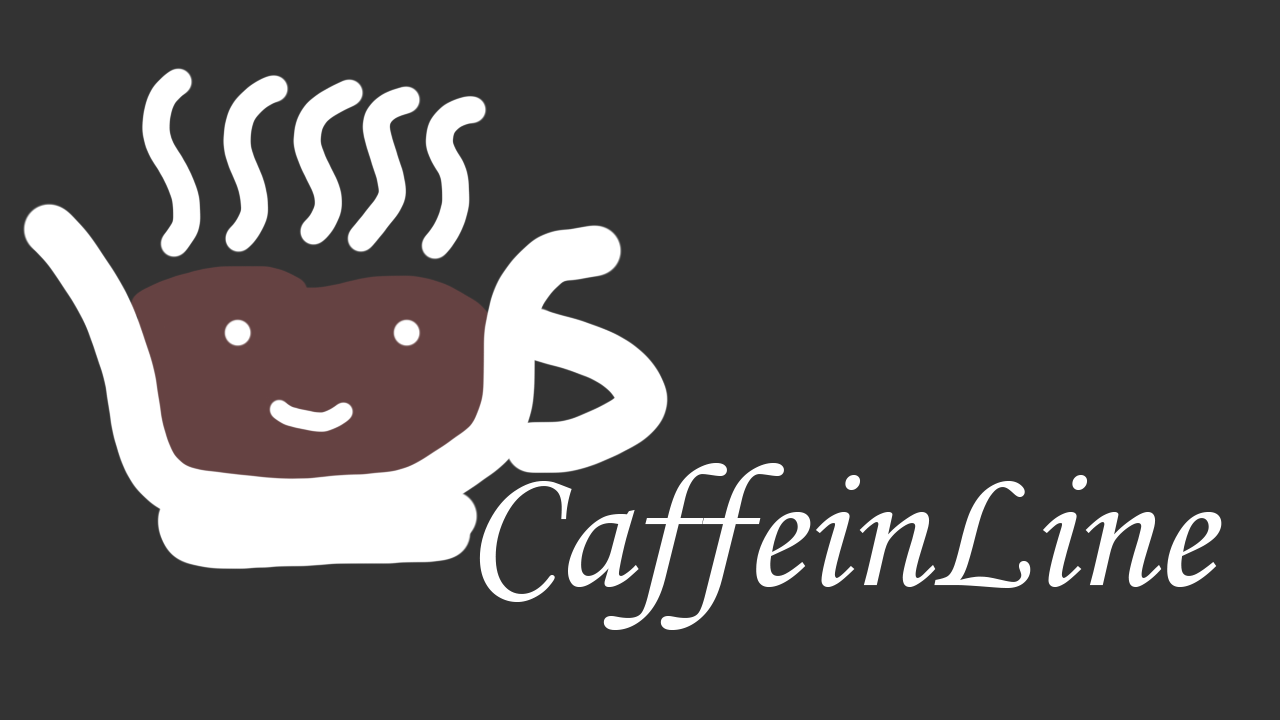
<style>
.page{position:relative;width:1280px;height:720px;background:#333333}
.page>*{position:absolute;margin:0}
.t1{font:177px "MonotypeCorsiva";color:#ffffff}
</style>
<div class="page">
<p class="t1" style="left:479px;top:463px;width:743px;height:167px">CaffeinLine</p>
</div>
